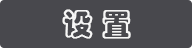
<style>
.page{position:relative;width:192px;height:48px;background:#48484d}
.page>*{position:absolute;margin:0}
.t1{font:30px "STCaiyun";color:#f6f6f6;font-weight:bold}
</style>
<div class="page">
<p class="t1" style="left:62px;top:9px;width:69px;height:30px">设 置</p>
</div>
